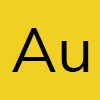
<style>
.page{position:relative;width:100px;height:100px;background:#f2d022}
.page>*{position:absolute;margin:0}
.t1{font:62.5px "Muli-Regular";color:#000000}
</style>
<div class="page">
<p class="t1" style="left:12px;top:28px;width:77px;height:44px">Au</p>
</div>
